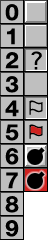
<style>
.page{position:relative;width:48px;height:240px;background:#bfbfbf}
.page>*{position:absolute;margin:0}
.t1{font:22.3px "HelveticaNeue-Bold";letter-spacing:-0.025em;color:#000000;scale:1.08 1}
.t2{font:32px "AppleSymbols";letter-spacing:-0.025em;color:#000000;scale:1.08 1}
.t3{font:19.9px "AppleSymbols";letter-spacing:-0.025em;color:#000000;scale:1.08 1}
</style>
<div class="page">
<p class="t1" style="left:5px;top:4px;width:14px;height:17px">0</p>
<p class="t1" style="left:7px;top:28px;width:8px;height:17px">1</p>
<p class="t1" style="left:5px;top:52px;width:14px;height:17px">2</p>
<p class="t2" style="left:31px;top:51px;width:11px;height:19px">?</p>
<p class="t1" style="left:5px;top:76px;width:14px;height:17px">3</p>
<p class="t1" style="left:5px;top:100px;width:14px;height:17px">4</p>
<p class="t3" style="left:29px;top:100px;width:14px;height:15px">⚐</p>
<p class="t1" style="left:5px;top:124px;width:14px;height:17px">5</p>
<p class="t3" style="left:29px;top:124px;width:14px;height:15px">⚐</p>
<p class="t1" style="left:5px;top:148px;width:14px;height:17px">6</p>
<p class="t1" style="left:6px;top:172px;width:12px;height:17px">7</p>
<p class="t1" style="left:5px;top:196px;width:14px;height:17px">8</p>
<p class="t1" style="left:5px;top:220px;width:14px;height:17px">9</p>
</div>
